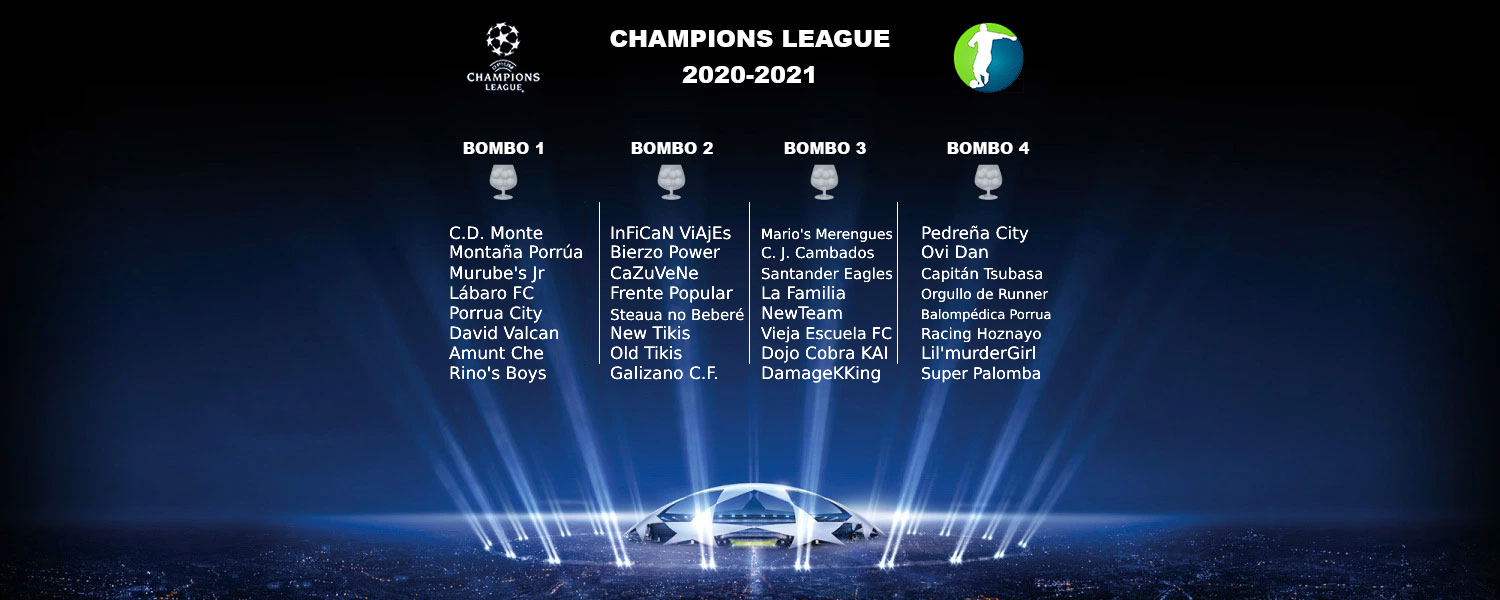
<style>
.page{position:relative;width:1500px;height:600px}
.page>*{position:absolute;margin:0}
.t1{font:17px "DejaVuSans";color:#ffffff}
.t2{font:14px "DejaVuSans";color:#ffffff}
.t3{font:15px "DejaVuSans";color:#ffffff}
.t4{font:13px "DejaVuSans";color:#ffffff}
.t5{font:16px "DejaVuSans";color:#ffffff}
</style>
<div class="page">
<p class="t1" style="left:449px;top:226px;width:94px;height:14px">C.D. Monte</p>
<p class="t1" style="left:611px;top:226px;width:120px;height:17px">InFiCaN ViAjEs</p>
<p class="t2" style="left:762px;top:228px;width:131px;height:14px">Mario's Merengues</p>
<p class="t1" style="left:922px;top:225px;width:107px;height:18px">Pedreña City</p>
<p class="t1" style="left:450px;top:244px;width:132px;height:15px">Montaña Porrúa</p>
<p class="t1" style="left:611px;top:245px;width:109px;height:14px">Bierzo Power</p>
<p class="t3" style="left:761px;top:246px;width:113px;height:16px">C. J. Cambados</p>
<p class="t1" style="left:921px;top:245px;width:67px;height:14px">Ovi Dan</p>
<p class="t1" style="left:450px;top:266px;width:95px;height:17px">Murube's Jr</p>
<p class="t1" style="left:610px;top:266px;width:88px;height:14px">CaZuVeNe</p>
<p class="t3" style="left:761px;top:267px;width:132px;height:16px">Santander Eagles</p>
<p class="t3" style="left:921px;top:267px;width:122px;height:16px">Capitán Tsubasa</p>
<p class="t1" style="left:450px;top:285px;width:84px;height:15px">Lábaro FC</p>
<p class="t1" style="left:611px;top:286px;width:122px;height:17px">Frente Popular</p>
<p class="t1" style="left:762px;top:286px;width:83px;height:14px">La Familia</p>
<p class="t2" style="left:921px;top:288px;width:128px;height:14px">Orgullo de Runner</p>
<p class="t1" style="left:450px;top:306px;width:93px;height:17px">Porrua City</p>
<p class="t3" style="left:611px;top:308px;width:133px;height:13px">Steaua no Beberé</p>
<p class="t1" style="left:762px;top:306px;width:80px;height:14px">NewTeam</p>
<p class="t4" style="left:922px;top:308px;width:129px;height:14px">Balompédica Porrua</p>
<p class="t1" style="left:450px;top:326px;width:109px;height:14px">David Valcan</p>
<p class="t1" style="left:611px;top:326px;width:79px;height:14px">New Tikis</p>
<p class="t5" style="left:761px;top:326px;width:131px;height:17px">Vieja Escuela FC</p>
<p class="t3" style="left:922px;top:327px;width:119px;height:16px">Racing Hoznayo</p>
<p class="t1" style="left:449px;top:346px;width:95px;height:14px">Amunt Che</p>
<p class="t1" style="left:610px;top:346px;width:72px;height:14px">Old Tikis</p>
<p class="t1" style="left:762px;top:346px;width:125px;height:17px">Dojo Cobra KAI</p>
<p class="t1" style="left:922px;top:346px;width:113px;height:14px">Lil'murderGirl</p>
<p class="t1" style="left:450px;top:366px;width:96px;height:17px">Rino's Boys</p>
<p class="t1" style="left:610px;top:366px;width:107px;height:14px">Galizano C.F.</p>
<p class="t1" style="left:762px;top:366px;width:118px;height:17px">DamageKKing</p>
<p class="t5" style="left:922px;top:366px;width:119px;height:17px">Super Palomba</p>
</div>
